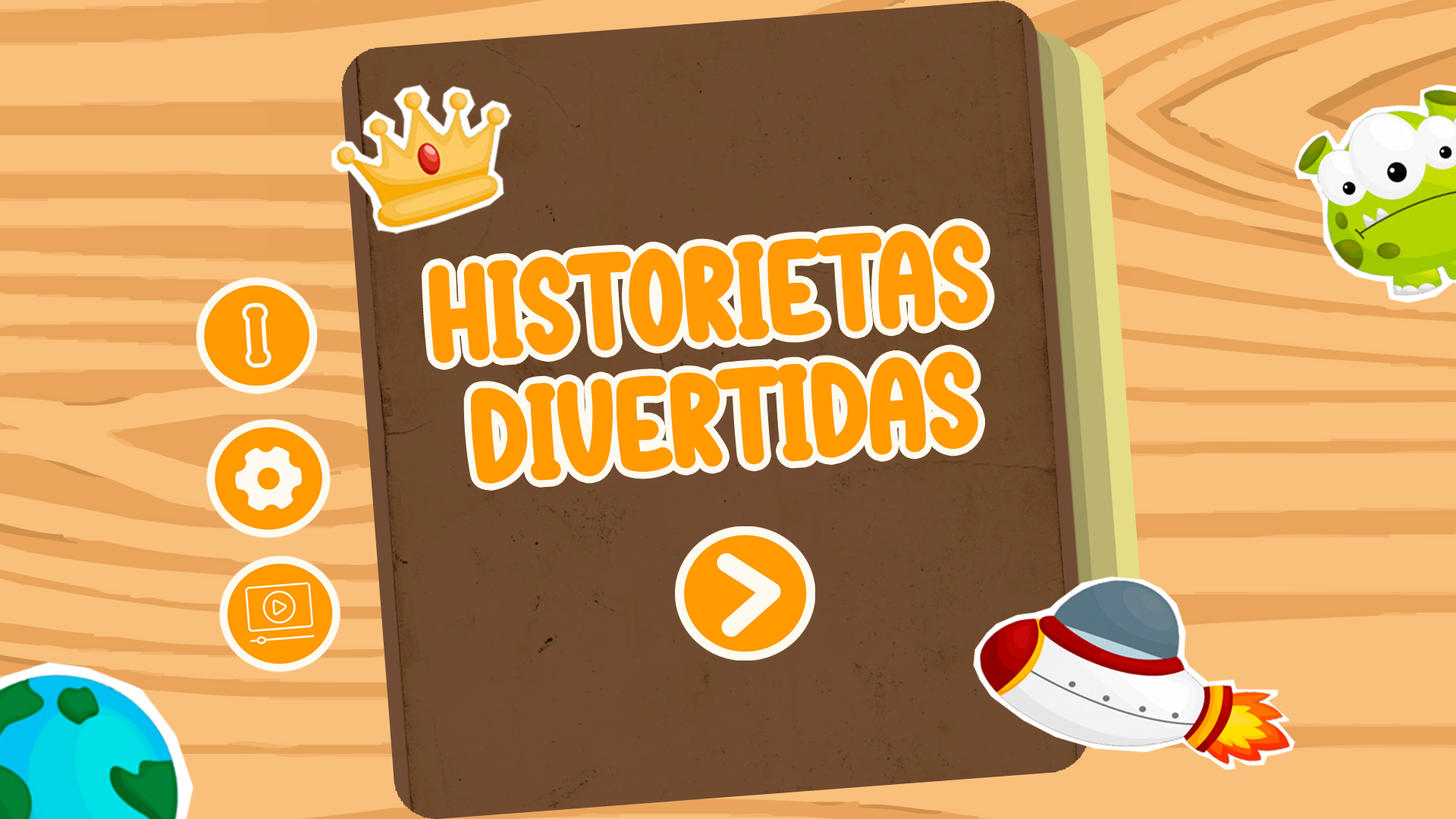
<style>
.page{position:relative;width:1456px;height:819px}
.page>*{position:absolute;margin:0}
.t1{font:202.7px "CafeCoffeeRegular";letter-spacing:-0.02em;color:#ff9a04}
.t2{font:200.9px "CafeCoffeeRegular";letter-spacing:-0.02em;color:#ff9a00}
</style>
<div class="page">
<p class="t1" style="left:428px;top:225px;width:560px;height:138px;rotate:-4deg">HISTORIETAS</p>
<p class="t2" style="left:471px;top:351px;width:507px;height:133px;rotate:-4deg">divertidas</p>
</div>
